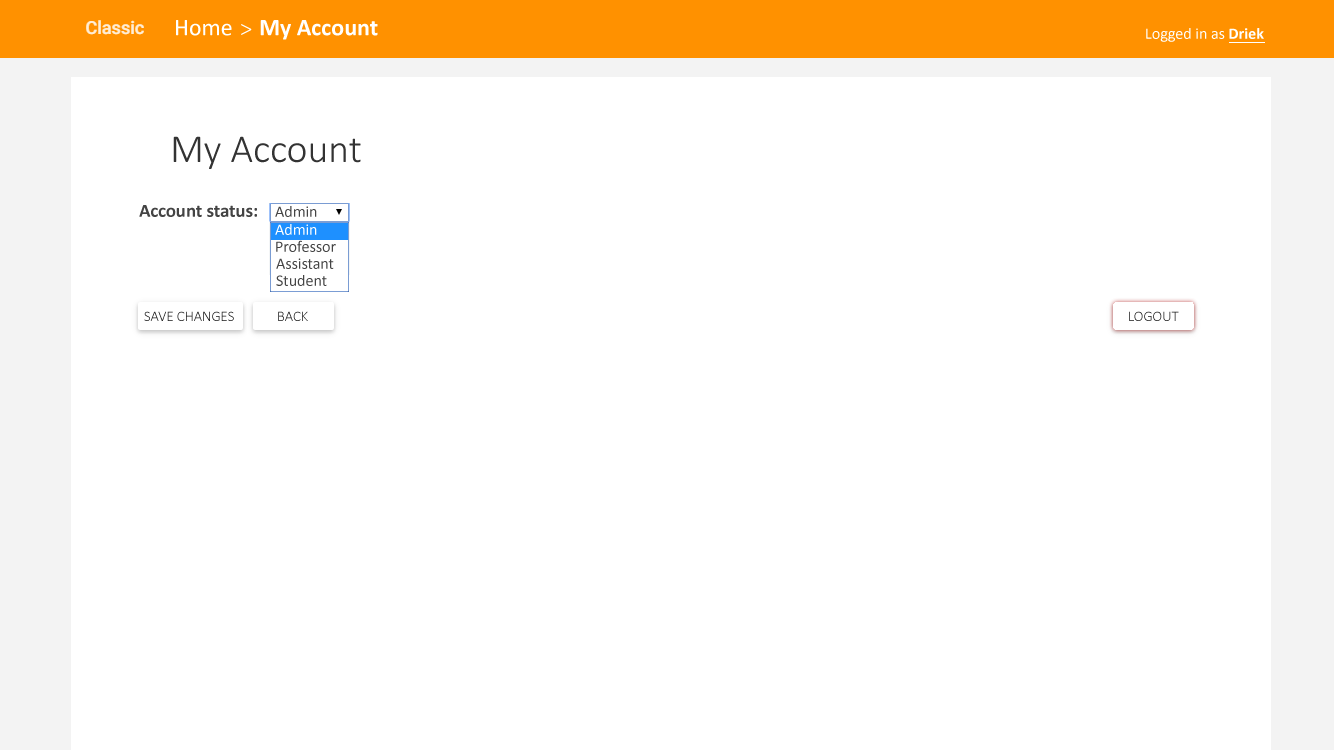
<style>
.page{position:relative;width:1334px;height:750px;background:#ffffff}
.page>*{position:absolute;margin:0}
.t1{font:24px "Calibri";color:#ffffff}
.t2{font:24px "Calibri-Light";color:#ffffff}
.t3{font:24px "Calibri-Bold";color:#ffffff}
.t4{font:16px "Calibri";color:#fffffe}
.t5{font:16px "Calibri-Bold";color:#fffffe}
.t6{font:40px "Calibri-Light";color:#333333}
.t7{font:18.7px "Calibri-Bold";color:#444444}
.t8{font:16px "Calibri";color:#444444}
.t9{font:16px "Calibri";color:#ffffff}
.t10{font:14.7px "Calibri-Light";color:#1b1b1b}
.t11{font:14.7px "Calibri-Light"}
</style>
<div class="page">
<p class="t1" style="left:176px;top:20px;width:56px;height:16px">Home</p>
<p class="t2" style="left:241px;top:24px;width:11px;height:11px">&gt;</p>
<p class="t3" style="left:260px;top:20px;width:118px;height:20px">My Account</p>
<p class="t4" style="left:1146px;top:28px;width:118px;height:14px">Logged in as <span class="t5">Driek</span></p>
<p class="t6" style="left:173px;top:136px;width:188px;height:33px">My Account</p>
<p class="t7" style="left:139px;top:205px;width:118px;height:12px">Account status:</p>
<p class="t8" style="left:275px;top:206px;width:42px;height:11px">Admin</p>
<p class="t9" style="left:275px;top:224px;width:42px;height:11px">Admin</p>
<p class="t8" style="left:276px;top:240px;width:60px;height:12px">Professor</p>
<p class="t8" style="left:276px;top:258px;width:58px;height:11px">Assistant</p>
<p class="t8" style="left:276px;top:275px;width:51px;height:11px">Student</p>
<p class="t10" style="left:144px;top:311px;width:90px;height:10px">SAVE CHANGES</p>
<p class="t11" style="left:278px;top:311px;width:30px;height:10px">BACK</p>
<p class="t11" style="left:1129px;top:311px;width:50px;height:10px">LOGOUT</p>
</div>
